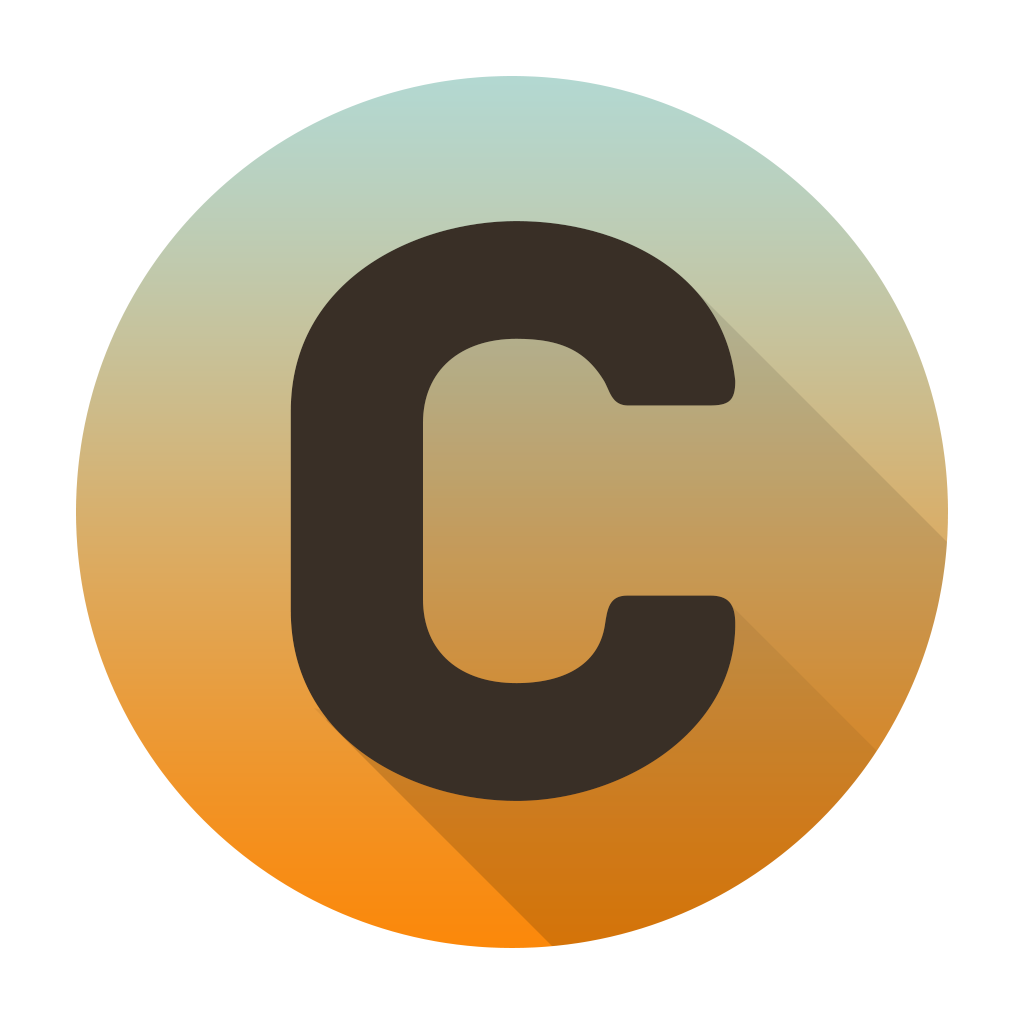
<style>
.page{position:relative;width:1024px;height:1024px;background:#ffffff}
.page>*{position:absolute;margin:0}
.t1{font:841.9px "Archive";color:#382e26}
</style>
<div class="page">
<p class="t1" style="left:290px;top:221px;width:446px;height:580px">C</p>
</div>
